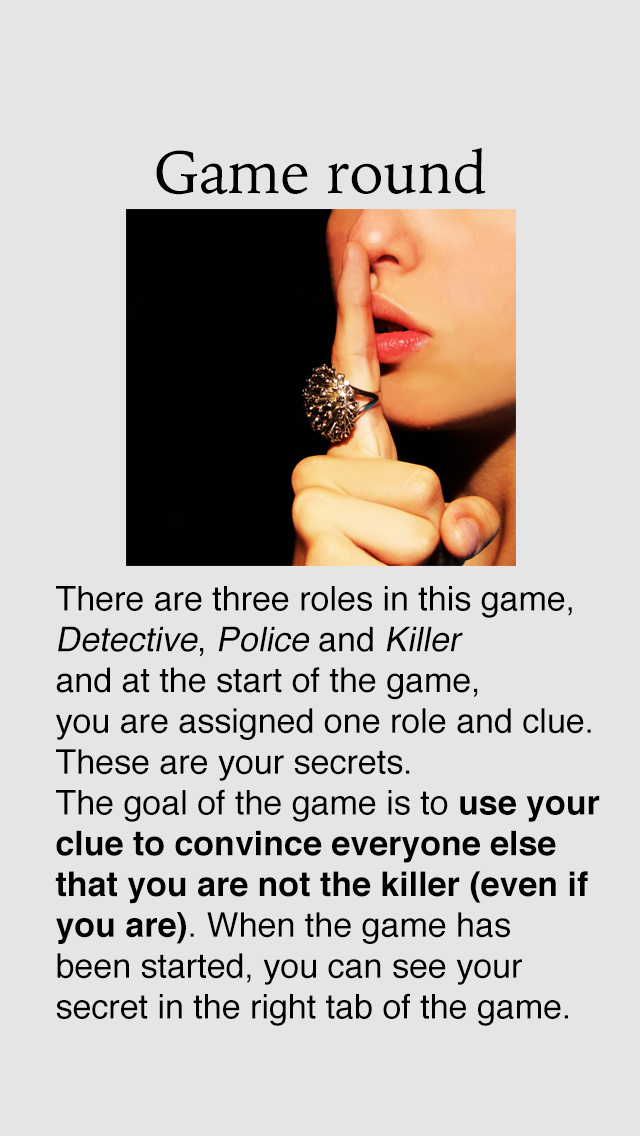
<style>
.page{position:relative;width:640px;height:1136px;background:#e5e5e5}
.page>*{position:absolute;margin:0}
.t1{font:60px "IowanOldStyle-Roman";color:#000000}
.t2{font:34px "Helvetica";color:#000000}
.t3{font:34px "Helvetica";color:#000000;font-style:italic}
.t4{font:34px "Helvetica-Bold";color:#000000}
</style>
<div class="page">
<p class="t1" style="left:156px;top:147px;width:330px;height:48px">Game round</p>
<p class="t2" style="left:55px;top:586px;width:545px;height:440px">There are three roles in this game,<br><span class="t3">Detective</span>, <span class="t3">Police</span> and <span class="t3">Killer<br></span>and at the start of the game,<br>you are assigned one role and clue.<br>These are your secrets.<br>The goal of the game is to <span class="t4">use your<br>clue to convince everyone else <br>that you are not the killer (even if <br>you are)</span>. When the game has<br>been started, you can see your<br>secret in the right tab of the game.</p>
</div>
